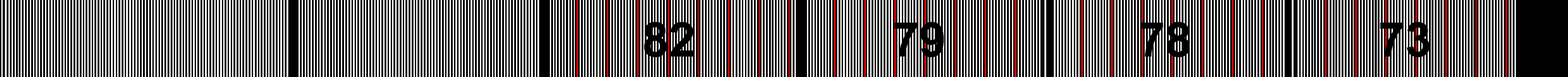
<style>
.page{position:relative;width:1568px;height:77px;background:#000000}
.page>*{position:absolute;margin:0}
.t1{font:48.1px "Arial-BoldMT";color:#000000}
</style>
<div class="page">
<p class="t1" style="left:644px;top:22px;width:49px;height:35px">82</p>
<p class="t1" style="left:894px;top:22px;width:50px;height:35px">79</p>
<p class="t1" style="left:1140px;top:22px;width:50px;height:35px">78</p>
<p class="t1" style="left:1380px;top:22px;width:50px;height:35px">73</p>
</div>
